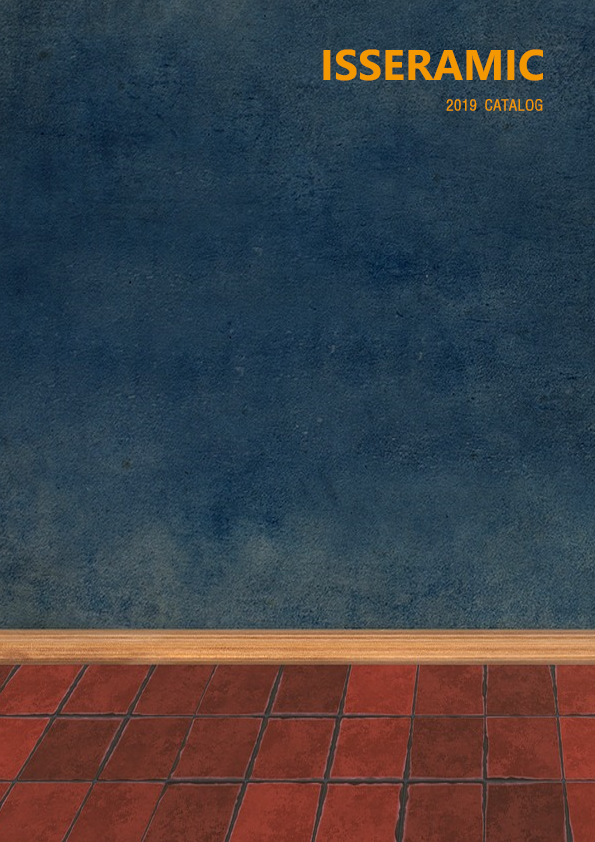
<style>
.page{position:relative;width:595px;height:842px}
.page>*{position:absolute;margin:0}
.t1{font:42.9px "SegoeUI-Bold";color:#f39800}
.t2{font:14px "MoeumTR-HM";color:#f39800}
</style>
<div class="page">
<p class="t1" style="left:323px;top:49px;width:220px;height:32px">ISSERAMIC</p>
<p class="t2" style="left:446px;top:99px;width:97px;height:12px">2019 CATALOG</p>
</div>
